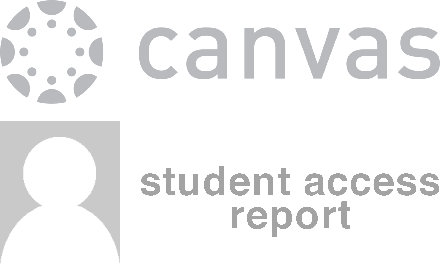
<style>
.page{position:relative;width:440px;height:280px;background:#ffffff}
.page>*{position:absolute;margin:0}
.t1{font:40px/33.6px "Helvetica-Bold";color:#a4a4a4;font-weight:bold}
</style>
<div class="page">
<p class="t1" style="left:140px;top:166px;width:300px;height:72px;text-align:center">student access<br>report</p>
</div>
